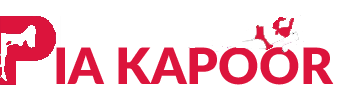
<style>
.page{position:relative;width:338px;height:85px;background:#ffffff}
.page>*{position:absolute;margin:0}
.t1{font:50px "Lato-Black";color:#dc143c}
</style>
<div class="page">
<p class="t1" style="left:56px;top:47px;width:278px;height:38px">IA KAPOOR</p>
</div>
